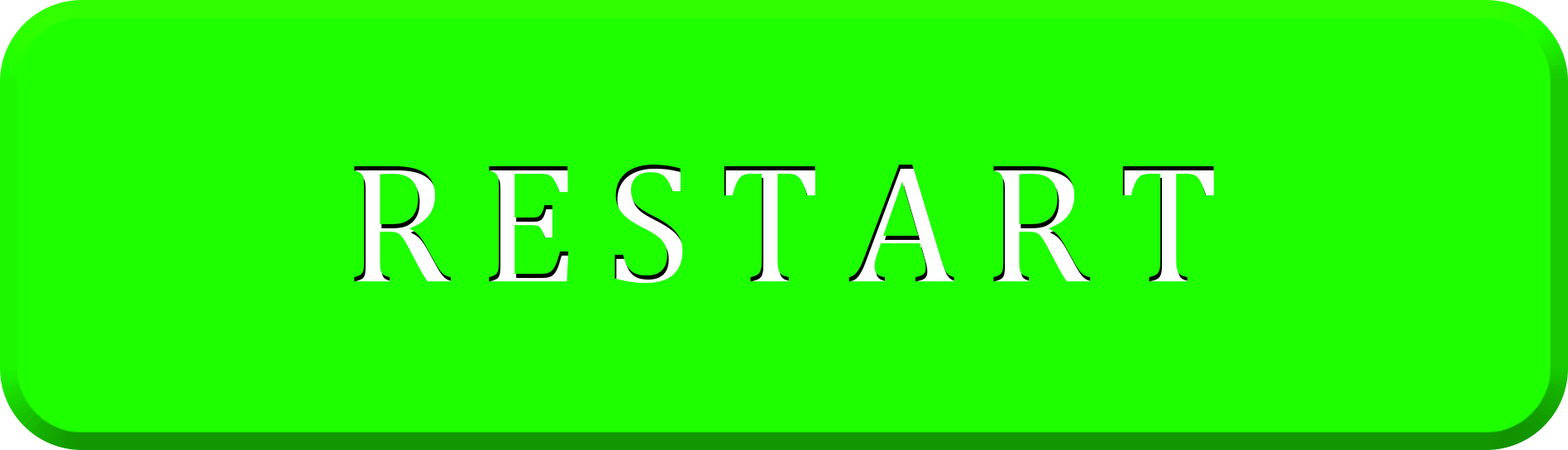
<style>
.page{position:relative;width:1568px;height:450px;background:#1eff00}
.page>*{position:absolute;margin:0}
.t1{font:172.3px "CambriaMath";letter-spacing:0.16em;color:#ffffff}
</style>
<div class="page">
<p class="t1" style="left:354px;top:165px;width:860px;height:118px">RESTART</p>
</div>
